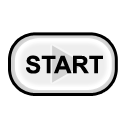
<style>
.page{position:relative;width:128px;height:128px;background:#ffffff}
.page>*{position:absolute;margin:0}
.t1{font:24px "Arial-BoldMT";color:#000000}
</style>
<div class="page">
<p class="t1" style="left:26px;top:55px;width:77px;height:19px">START</p>
</div>
